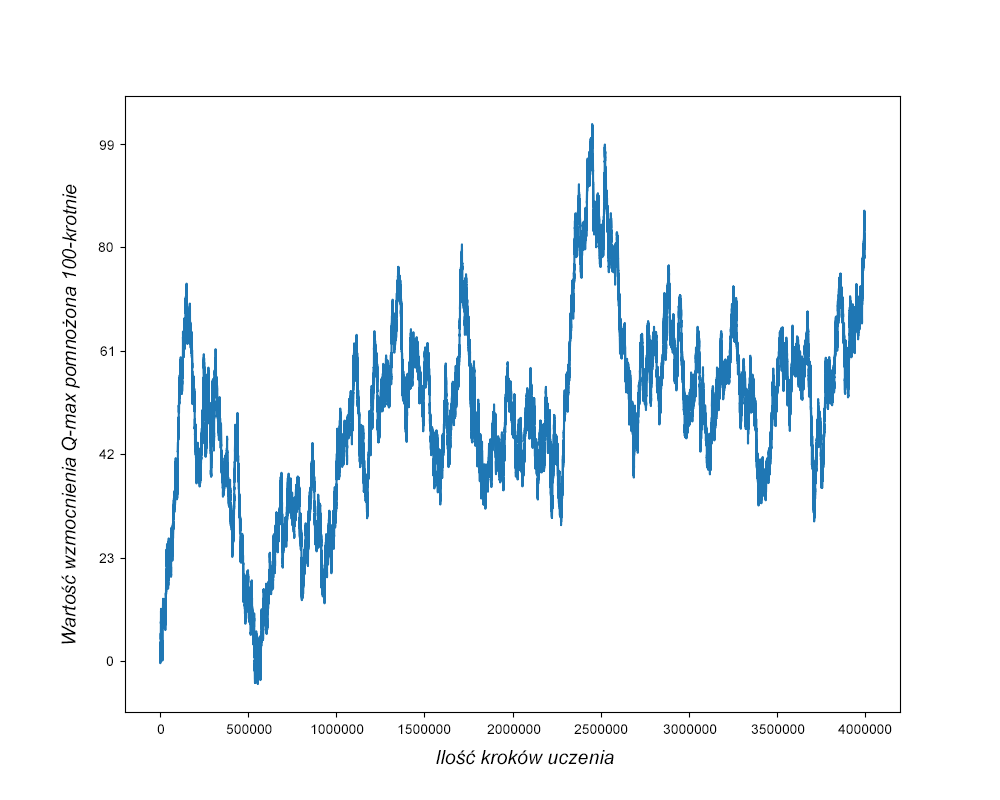
<style>
.page{position:relative;width:1000px;height:800px;background:#ffffff}
.page>*{position:absolute;margin:0}
.t1{font:13.9px "ArialMT";color:#000000}
.t2{font:19.4px "Arial-ItalicMT";color:#000000}
</style>
<div class="page">
<p class="t1" style="left:99px;top:140px;width:15px;height:10px">99</p>
<p class="t2" style="left:61px;top:184px;width:19px;height:460px;rotate:-90deg">Wartość wzmocnienia Q-max pomnożona 100-krotnie</p>
<p class="t1" style="left:98px;top:242px;width:15px;height:10px">80</p>
<p class="t1" style="left:100px;top:346px;width:13px;height:10px">61</p>
<p class="t1" style="left:99px;top:449px;width:15px;height:10px">42</p>
<p class="t1" style="left:99px;top:553px;width:15px;height:10px">23</p>
<p class="t1" style="left:106px;top:656px;width:7px;height:10px">0</p>
<p class="t1" style="left:157px;top:724px;width:7px;height:10px">0</p>
<p class="t1" style="left:226px;top:724px;width:46px;height:10px">500000</p>
<p class="t1" style="left:311px;top:724px;width:53px;height:10px">1000000</p>
<p class="t1" style="left:398px;top:724px;width:53px;height:10px">1500000</p>
<p class="t1" style="left:487px;top:724px;width:54px;height:10px">2000000</p>
<p class="t1" style="left:574px;top:724px;width:54px;height:10px">2500000</p>
<p class="t1" style="left:663px;top:724px;width:54px;height:10px">3000000</p>
<p class="t1" style="left:751px;top:724px;width:54px;height:10px">3500000</p>
<p class="t1" style="left:838px;top:724px;width:54px;height:10px">4000000</p>
<p class="t2" style="left:436px;top:750px;width:178px;height:15px">Ilość kroków uczenia</p>
</div>
